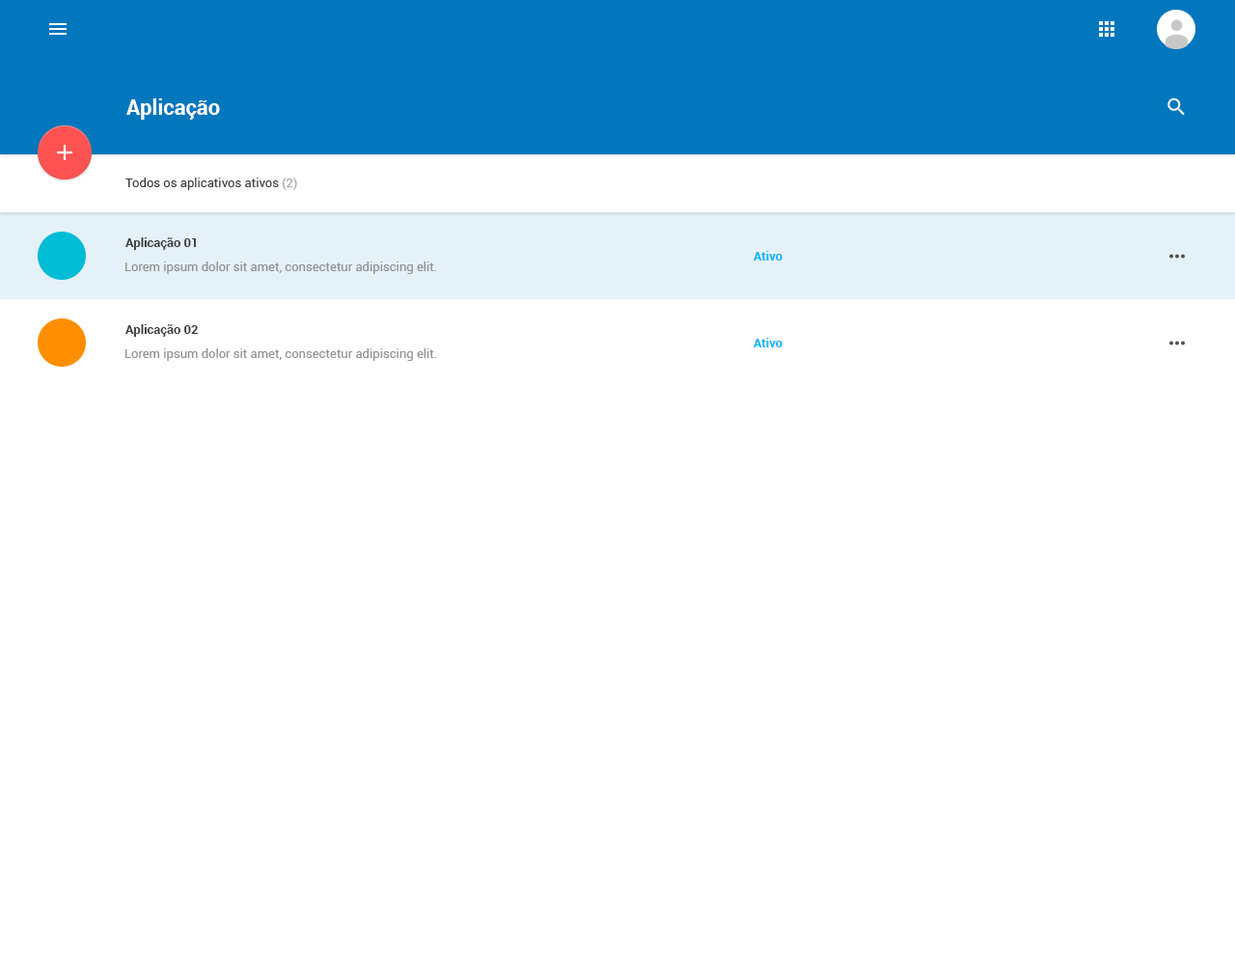
<style>
.page{position:relative;width:1235px;height:965px;background:#ffffff}
.page>*{position:absolute;margin:0}
.t1{font:21.2px "Roboto-Bold";color:#ffffff}
.t2{font:12.5px "Roboto-Regular";color:#3d3d3d}
.t3{font:12.5px "Roboto-Regular";color:#a7a7a7}
.t4{font:12.5px "Roboto-Bold";color:#3d3d3d}
.t5{font:12.5px "Roboto-Bold";color:#00b0ff}
.t6{font:12.5px "Roboto-Regular";color:#929292}
</style>
<div class="page">
<p class="t1" style="left:126px;top:98px;width:94px;height:22px">Aplicação</p>
<p class="t2" style="left:125px;top:178px;width:172px;height:12px">Todos os aplicativos ativos <span class="t3">(2)</span></p>
<p class="t4" style="left:125px;top:237px;width:71px;height:13px">Aplicação 01</p>
<p class="t5" style="left:754px;top:251px;width:29px;height:10px">Ativo</p>
<p class="t6" style="left:125px;top:262px;width:312px;height:12px">Lorem ipsum dolor sit amet, consectetur adipiscing elit.</p>
<p class="t4" style="left:125px;top:324px;width:74px;height:13px">Aplicação 02</p>
<p class="t5" style="left:754px;top:338px;width:29px;height:9px">Ativo</p>
<p class="t6" style="left:125px;top:348px;width:312px;height:13px">Lorem ipsum dolor sit amet, consectetur adipiscing elit.</p>
</div>
